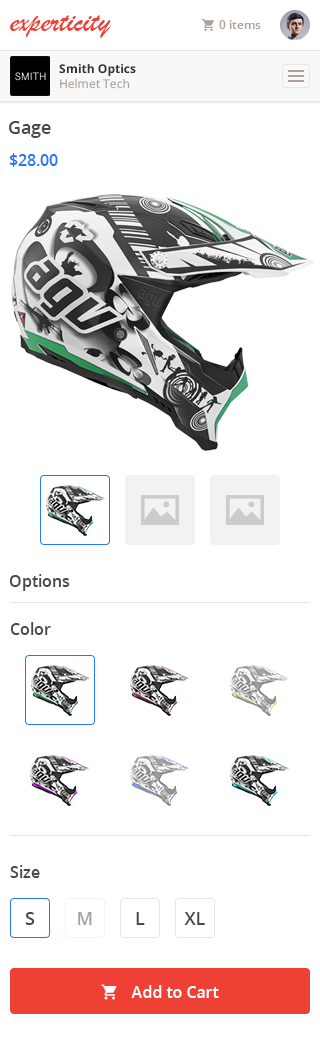
<style>
.page{position:relative;width:320px;height:1044px;background:#ffffff}
.page>*{position:absolute;margin:0}
.t1{font:32px "BrushScriptMT";color:#ef4036}
.t2{font:12px "OpenSans-Semibold";color:#aea299}
.t3{font:12px/15px "OpenSans-Bold";color:#333333}
.t4{font:12px/15px "OpenSans";color:#aea299}
.t5{font:18px "OpenSans-Semibold";color:#4a4a4a}
.t6{font:16px "OpenSans-Semibold";color:#2579f8}
.t7{font:16px "OpenSans-Semibold";color:#4a4a4a}
.t8{font:18px "OpenSans-Semibold";color:#a4a4a4}
.t9{font:16px "OpenSans-Semibold";color:#ffffff}
</style>
<div class="page">
<p class="t1" style="left:10px;top:15px;width:101px;height:23px">experticity</p>
<p class="t2" style="left:219px;top:20px;width:42px;height:9px">0 items</p>
<p class="t3" style="left:59px;top:63px;width:77px;height:26px">Smith Optics<br><span class="t4">Helmet Tech</span></p>
<p class="t5" style="left:9px;top:121px;width:42px;height:17px">Gage</p>
<p class="t6" style="left:9px;top:153px;width:49px;height:14px">$28.00</p>
<p class="t7" style="left:9px;top:574px;width:61px;height:17px">Options</p>
<p class="t7" style="left:10px;top:622px;width:41px;height:13px">Color</p>
<p class="t7" style="left:10px;top:865px;width:30px;height:13px">Size</p>
<p class="t5" style="left:25px;top:912px;width:10px;height:13px">S</p>
<p class="t8" style="left:78px;top:912px;width:14px;height:13px">M</p>
<p class="t5" style="left:136px;top:912px;width:9px;height:13px">L</p>
<p class="t5" style="left:184px;top:912px;width:21px;height:13px">XL</p>
<p class="t9" style="left:131px;top:985px;width:88px;height:13px">Add to Cart</p>
</div>
